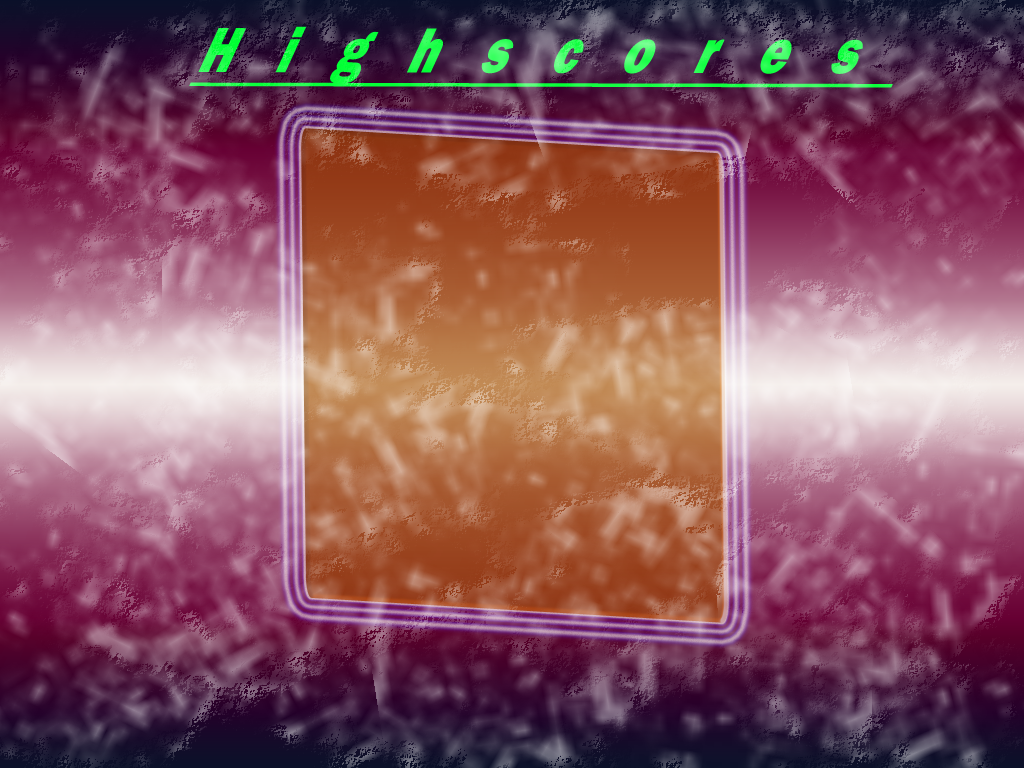
<style>
.page{position:relative;width:1024px;height:768px}
.page>*{position:absolute;margin:0}
.t1{font:72px "FranklinGothic-Heavy";letter-spacing:0.9em;font-weight:bold;text-decoration:underline;scale:0.67 1}
</style>
<div class="page">
<p class="t1" style="left:189px;top:26px;width:704px;height:62px">Highscores</p>
</div>
